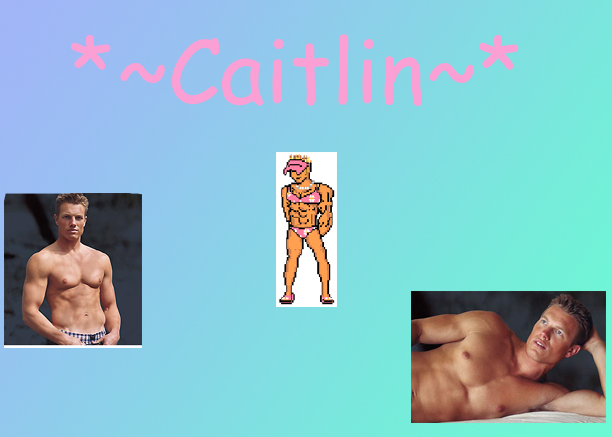
<style>
.page{position:relative;width:612px;height:437px}
.page>*{position:absolute;margin:0}
.t1{font:87.4px "ComicSansMS";color:#faa0d5}
</style>
<div class="page">
<p class="t1" style="left:71px;top:34px;width:448px;height:72px">*~Caitlin~*</p>
</div>
